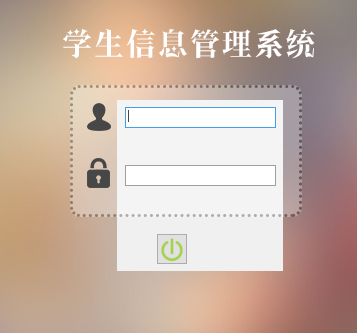
<style>
.page{position:relative;width:357px;height:333px}
.page>*{position:absolute;margin:0}
.t1{font:32px "AaGothic";color:#ffffff}
</style>
<div class="page">
<p class="t1" style="left:63px;top:28px;width:252px;height:31px">学生信息管理系统</p>
</div>
